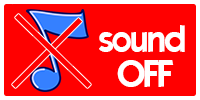
<style>
.page{position:relative;width:200px;height:100px;background:#ff0000}
.page>*{position:absolute;margin:0}
.t1{font:36px "ELEGANCE";color:#ffffff}
</style>
<div class="page">
<p class="t1" style="left:99px;top:25px;width:86px;height:27px">sound</p>
<p class="t1" style="left:117px;top:60px;width:57px;height:27px">OFF</p>
</div>
